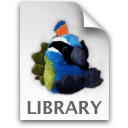
<style>
.page{position:relative;width:128px;height:128px;background:#ffffff}
.page>*{position:absolute;margin:0}
.t1{font:18px "LucidaGrande-Bold";letter-spacing:-0.02em;color:#656565}
</style>
<div class="page">
<p class="t1" style="left:27px;top:101px;width:75px;height:13px">LIBRARY</p>
</div>
